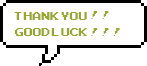
<style>
.page{position:relative;width:147px;height:66px;background:#ffffff}
.page>*{position:absolute;margin:0}
.t1{font:16px "ArcadeClassic";color:#97a732}
</style>
<div class="page">
<p class="t1" style="left:14px;top:12px;width:73px;height:8px">thank you</p>
<p class="t1" style="left:91px;top:11px;width:18px;height:8px">!!</p>
<p class="t1" style="left:15px;top:28px;width:72px;height:8px">good luck</p>
<p class="t1" style="left:91px;top:28px;width:29px;height:8px">!!!</p>
</div>
